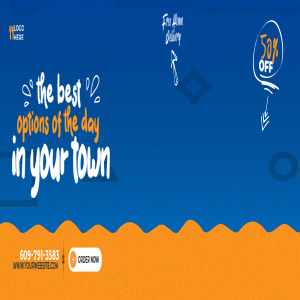
<style>
.page{position:relative;width:300px;height:300px}
.page>*{position:absolute;margin:0}
.t1{font:19.7px "Varokah";letter-spacing:0.025em;color:#ffffff;scale:0.38 1}
.t2{font:7.7px "Montserrat-Bold";letter-spacing:0.05em;text-transform:uppercase;scale:0.38 1}
.t3{font:41.3px "Amsterdam-Regular";letter-spacing:0.025em;color:#ff961e;scale:0.38 1}
.t4{font:15.4px "Montserrat-Black";color:#ffffff;text-transform:uppercase;scale:0.38 1}
.t5{font:29.3px "MarkCatyniaRegular";color:#ffffff;scale:0.38 1}
.t6{font:25px "MarkCatyniaRegular";color:#ff961e;scale:0.38 1}
.t7{font:49px "MarkCatyniaRegular";letter-spacing:-0.05em;color:#ffffff;scale:0.38 1}
.t8{font:13.5px "Montserrat-Bold";letter-spacing:0.05em;color:#ffffff;text-transform:uppercase;scale:0.38 1}
.t9{font:7.7px "Montserrat-Bold";color:#232323;text-transform:uppercase;scale:0.38 1}
.t10{font:7.7px "Montserrat-SemiBold";letter-spacing:0.05em;color:#032640;text-transform:uppercase;scale:0.38 1}
</style>
<div class="page">
<p class="t1" style="left:162px;top:13px;width:21px;height:33px;rotate:-4deg">Free Home Delivery</p>
<p class="t2" style="left:14px;top:25px;width:10px;height:15px">Logo<br>Here</p>
<p class="t3" style="left:260px;top:34px;width:18px;height:30px;rotate:5deg">50%</p>
<p class="t4" style="left:259px;top:59px;width:14px;height:14px;rotate:9deg">Off</p>
<p class="t5" style="left:36px;top:72px;width:45px;height:37px">the best</p>
<p class="t6" style="left:17px;top:105px;width:82px;height:38px">options of the day</p>
<p class="t7" style="left:12px;top:135px;width:98px;height:63px">in your town</p>
<p class="t8" style="left:20px;top:250px;width:39px;height:10px">609-791-3583</p>
<p class="t9" style="left:78px;top:256px;width:21px;height:7px">Order Now</p>
<p class="t10" style="left:13px;top:262px;width:45px;height:7px">www.yourwebsite.com</p>
</div>
